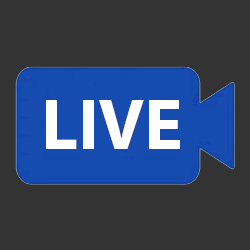
<style>
.page{position:relative;width:250px;height:250px;background:#333333}
.page>*{position:absolute;margin:0}
.t1{font:72px "MyriadPro-Bold";color:#ffffff}
</style>
<div class="page">
<p class="t1" style="left:46px;top:100px;width:134px;height:49px">LIVE</p>
</div>
